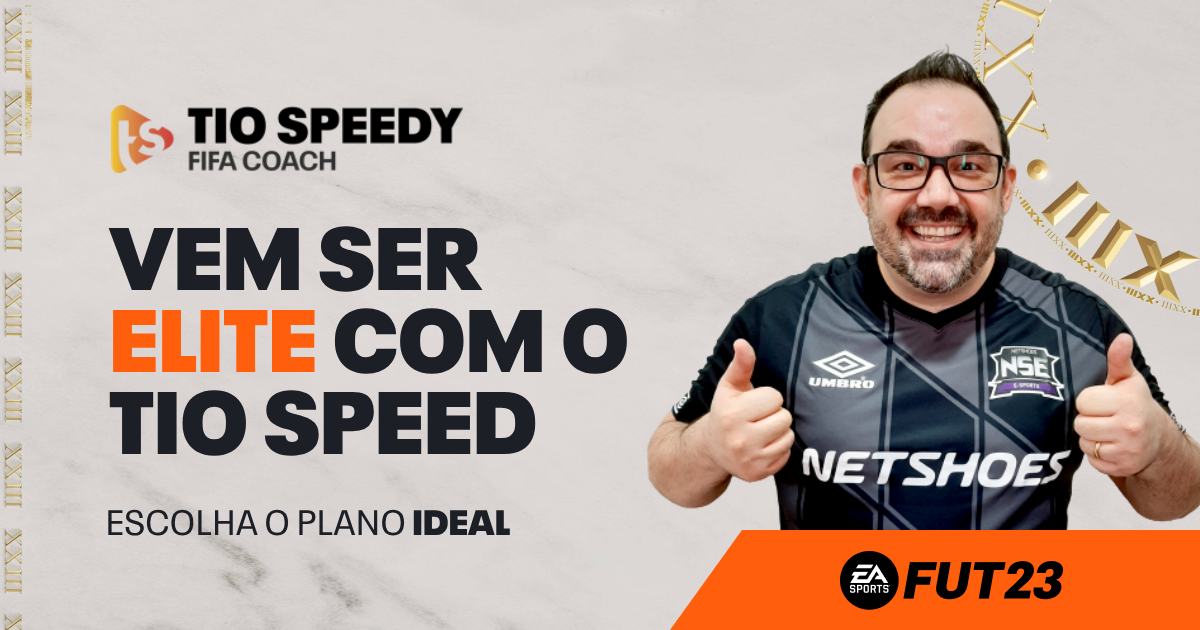
<style>
.page{position:relative;width:1200px;height:630px}
.page>*{position:absolute;margin:0}
.t1{font:87.9px/81.9px "NeuePlak-ExtraBlack";color:#1c1f26}
.t2{font:87.9px/81.9px "NeuePlak-ExtraBlack";color:#ff5e0c}
.t3{font:35px "NeuePlakText-Regular";color:#1c1f26}
.t4{font:35px "NeuePlak-ExtraBlack";color:#1c1f26}
</style>
<div class="page">
<p class="t1" style="left:108px;top:226px;width:519px;height:230px">VEM SER <span class="t2">ELITE</span> COM O TIO SPEED</p>
<p class="t3" style="left:108px;top:509px;width:402px;height:27px">ESCOLHA O PLANO <span class="t4">IDEAL</span></p>
</div>
